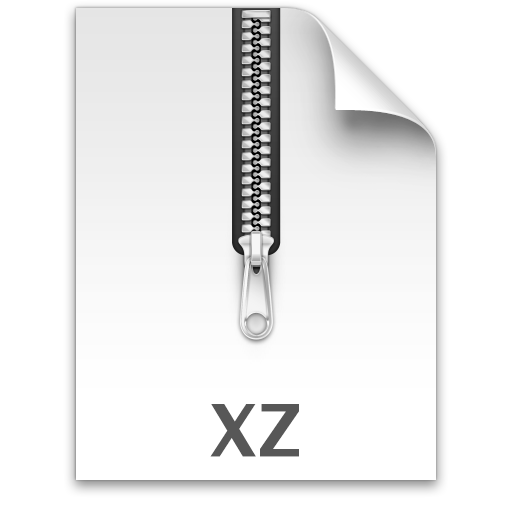
<style>
.page{position:relative;width:512px;height:512px;background:#ffffff}
.page>*{position:absolute;margin:0}
.t1{font:72.5px "LucidaSans-Demi";letter-spacing:-0.013em;color:#575757}
</style>
<div class="page">
<p class="t1" style="left:210px;top:404px;width:89px;height:53px">XZ</p>
</div>
